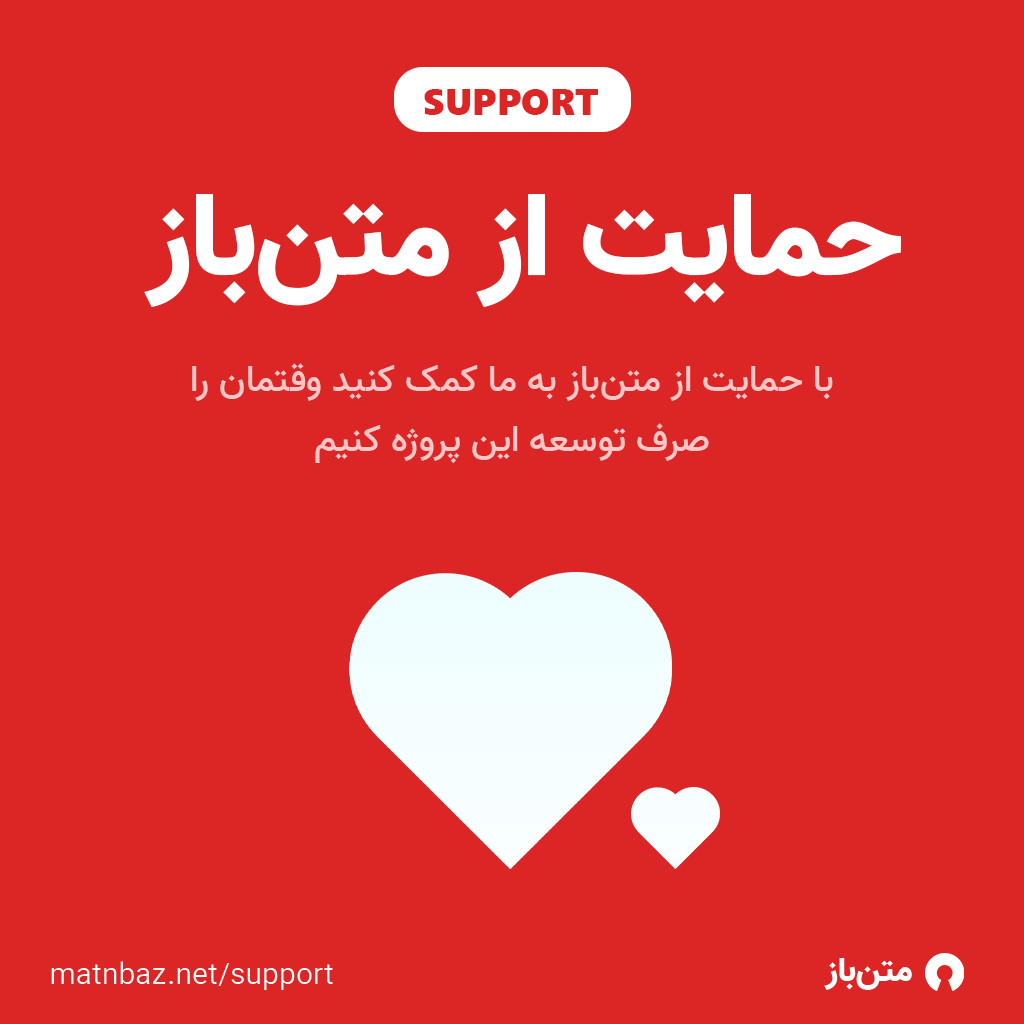
<style>
.page{position:relative;width:1024px;height:1024px;background:#dc2626}
.page>*{position:absolute;margin:0}
.t1{font:37.4px "SegoeUIBlack";color:#dc2626}
.t2{font:118.9px "Vazir-Black";color:#ffffff}
.t3{font:37.4px/59.9px "Vazir-Medium";color:#fec7c7}
.t4{font:30px "Vazir-Light";color:#ffffff}
.t5{font:34.2px "Vazir-Black";color:#ffffff}
</style>
<div class="page">
<p class="t1" style="left:424px;top:89px;width:174px;height:26px">SUPPORT</p>
<p class="t2" style="left:144px;top:194px;width:757px;height:114px">حمایت از متن‌باز</p>
<p class="t3" style="left:192px;top:363px;width:641px;height:100px;text-align:center">با حمایت از متن‌باز به ما کمک کنید وقتمان را صرف توسعه این پروژه کنیم</p>
<p class="t4" style="left:51px;top:961px;width:282px;height:29px">matnbaz.net/support</p>
<p class="t5" style="left:824px;top:958px;width:88px;height:32px">متن‌باز</p>
</div>
